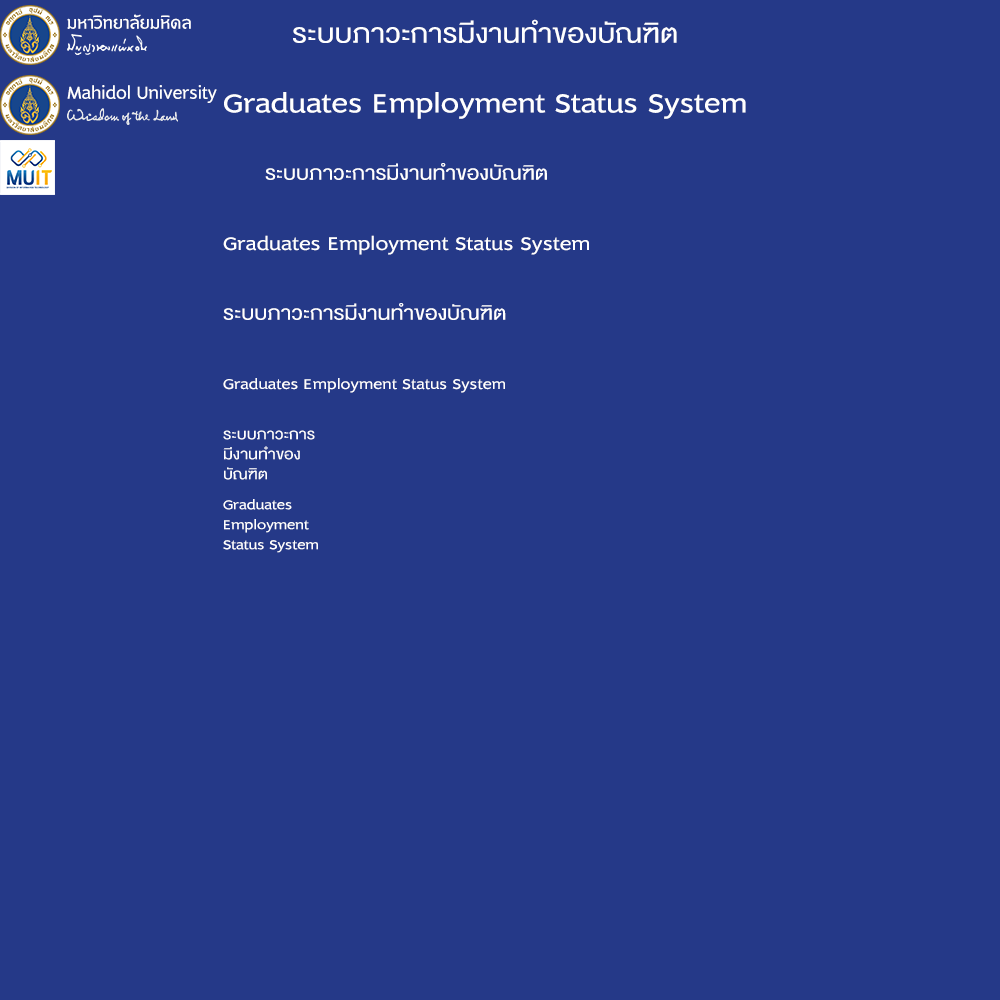
<style>
.page{position:relative;width:1000px;height:1000px;background:#253988}
.page>*{position:absolute;margin:0}
.t1{font:22.1px "DBLimX";color:#ffffff}
.t2{font:37.5px "DBHelvethaicaX-55Regular";color:#ffffff;scale:1.13 1}
.t3{font:33.3px "DBLimX";color:#ffffff;scale:1.13 1}
.t4{font:27.5px "DBHelvethaicaX-55Regular";color:#ffffff;scale:1.13 1}
.t5{font:23.3px "DBLimX";color:#ffffff;scale:1.13 1}
.t6{font:18px "DBLimX";color:#ffffff;scale:1.13 1}
.t7{font:20.8px/20px "DBHelvethaicaX-55Regular";color:#ffffff;scale:1.13 1}
.t8{font:16.5px/20px "DBLimX";color:#ffffff;scale:1.13 1}
</style>
<div class="page">
<p class="t1" style="left:67px;top:14px;width:124px;height:15px">มหาวิทยาลัยมหิดล</p>
<p class="t2" style="left:293px;top:19px;width:384px;height:25px">ระบบภาวะการมีงานทำของบัณฑิต</p>
<p class="t1" style="left:67px;top:85px;width:150px;height:18px">Mahidol University</p>
<p class="t3" style="left:224px;top:92px;width:522px;height:27px">Graduates Employment Status System</p>
<p class="t4" style="left:265px;top:163px;width:282px;height:17px">ระบบภาวะการมีงานทำของบัณฑิต</p>
<p class="t5" style="left:223px;top:235px;width:366px;height:20px">Graduates Employment Status System</p>
<p class="t4" style="left:223px;top:303px;width:283px;height:17px">ระบบภาวะการมีงานทำของบัณฑิต</p>
<p class="t6" style="left:223px;top:378px;width:282px;height:15px">Graduates Employment Status System</p>
<p class="t7" style="left:223px;top:430px;width:92px;height:50px">ระบบภาวะการ<br>มีงานทำของ<br>บัณฑิต</p>
<p class="t8" style="left:223px;top:499px;width:95px;height:54px;text-align:justify">Graduates<br>Employment<br>Status System</p>
</div>
